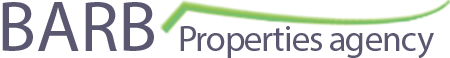
<style>
.page{position:relative;width:450px;height:58px;background:#ffffff}
.page>*{position:absolute;margin:0}
.t1{font:36px "MyriadPro-Regular";letter-spacing:-0.025em;color:#5a5770}
.t2{font:72px "MyriadPro-Regular";color:#5a5770}
</style>
<div class="page">
<p class="t1" style="left:2px;top:2px;width:432px;height:57px"><span class="t2">BARB  </span>Properties agency</p>
</div>
